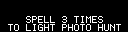
<style>
.page{position:relative;width:128px;height:32px;background:#000000}
.page>*{position:absolute;margin:0}
.t1{font:8px "Terminal";color:#ffffff}
</style>
<div class="page">
<p class="t1" style="left:26px;top:16px;width:77px;height:7px">SPELL 3 TIMES</p>
<p class="t1" style="left:8px;top:24px;width:113px;height:7px">TO LIGHT PHOTO HUNT</p>
</div>
